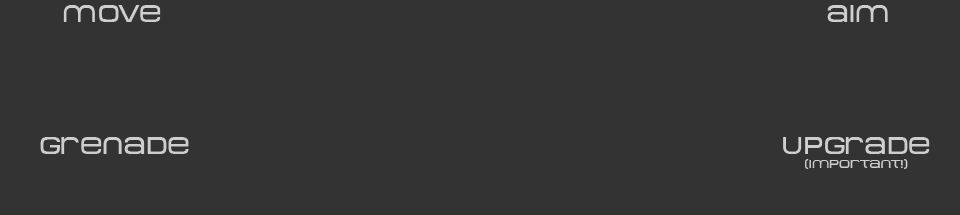
<style>
.page{position:relative;width:960px;height:215px;background:#333333}
.page>*{position:absolute;margin:0}
.t1{font:23.7px "MetroDF";color:#cecece}
.t2{font:12px "MetroDF";color:#cecece}
</style>
<div class="page">
<p class="t1" style="left:63px;top:5px;width:98px;height:17px">move</p>
<p class="t1" style="left:827px;top:5px;width:61px;height:17px">aim</p>
<p class="t1" style="left:40px;top:137px;width:149px;height:17px">grenade</p>
<p class="t2" style="left:783px;top:137px;width:147px;height:32px;text-align:center"><span class="t1">upgrade<br></span>(important!)</p>
</div>
